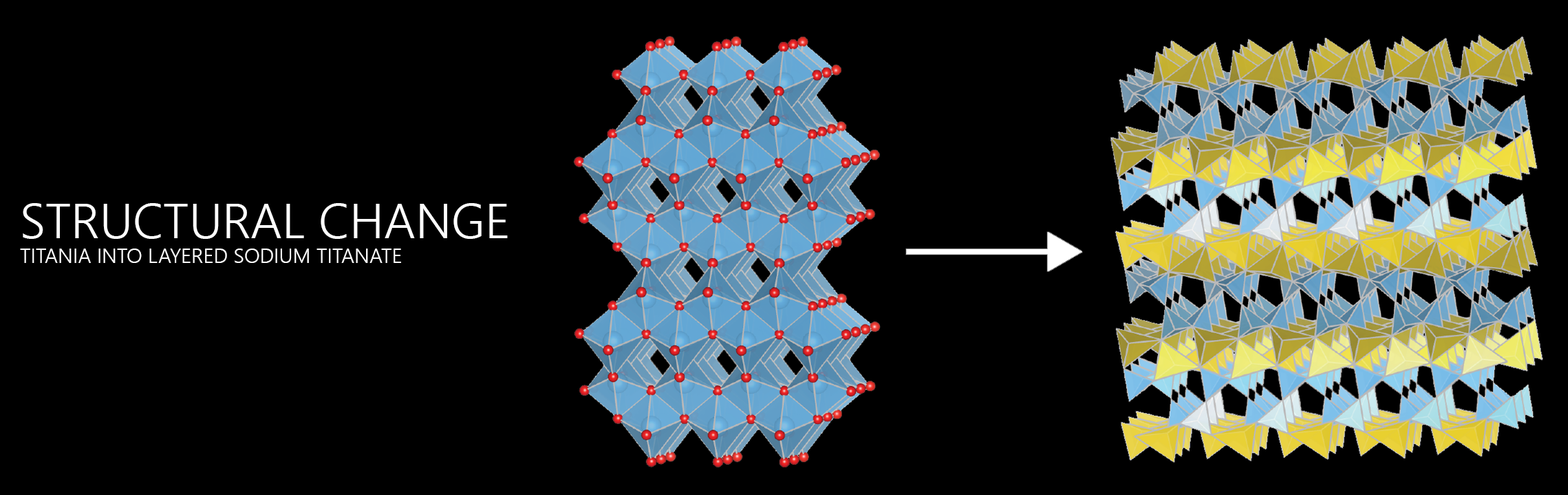
<style>
.page{position:relative;width:1568px;height:495px;background:#000000}
.page>*{position:absolute;margin:0}
.t1{font:20.6px "NirmalaUI-Semilight";color:#ffffff}
.t2{font:49.5px "NirmalaUI-Semilight";color:#ffffff}
</style>
<div class="page">
<p class="t1" style="left:20px;top:203px;width:488px;height:60px"><span class="t2">STRUCTURAL CHANGE<br></span>TITANIA INTO LAYERED SODIUM TITANATE</p>
</div>
